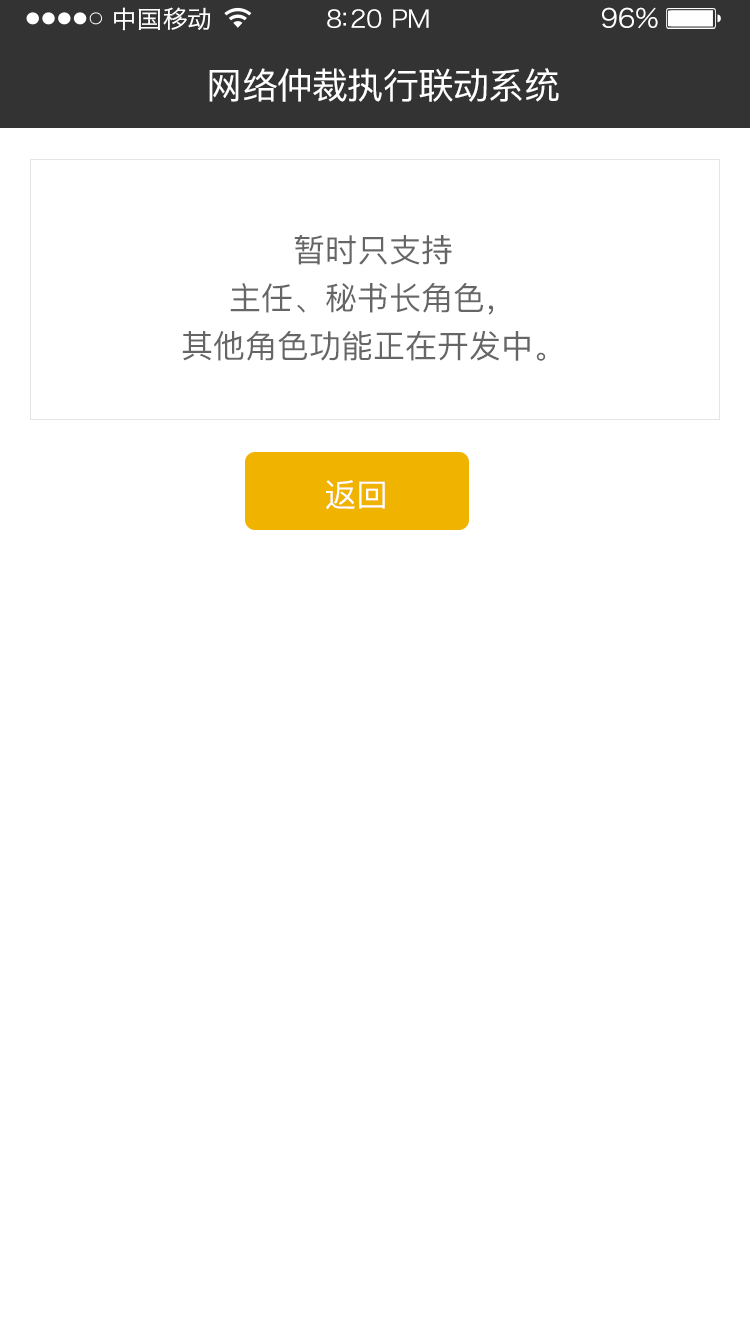
<style>
.page{position:relative;width:750px;height:1334px;background:#ffffff}
.page>*{position:absolute;margin:0}
.t1{font:24px "HiraginoSansGB-W3";letter-spacing:0.02em;color:#ffffff;scale:1.03 1}
.t2{font:24px "HiraginoSansGB-W3";letter-spacing:-0.02em;color:#ffffff;scale:1.03 1}
.t3{font:26.2px "HiraginoSansGB-W3";letter-spacing:-0.02em;color:#ffffff;scale:1.03 1}
.t4{font:36px "PingFang-SC-Medium";letter-spacing:-0.02em;color:#ffffff}
.t5{font:32px/48px "PingFang-SC-Medium";color:#666666}
.t6{font:32px "PingFang-SC-Medium";color:#ffffff}
</style>
<div class="page">
<p class="t1" style="left:114px;top:7px;width:97px;height:24px">中国移动</p>
<p class="t2" style="left:327px;top:9px;width:102px;height:19px">8:20 PM</p>
<p class="t3" style="left:602px;top:7px;width:56px;height:22px">96%</p>
<p class="t4" style="left:209px;top:68px;width:350px;height:34px">网络仲裁执行联动系统</p>
<p class="t5" style="left:182px;top:235px;width:364px;height:126px;text-align:center">暂时只支持<br>主任、秘书长角色，<br>其他角色功能正在开发中。</p>
<p class="t6" style="left:326px;top:480px;width:59px;height:30px">返回</p>
</div>
